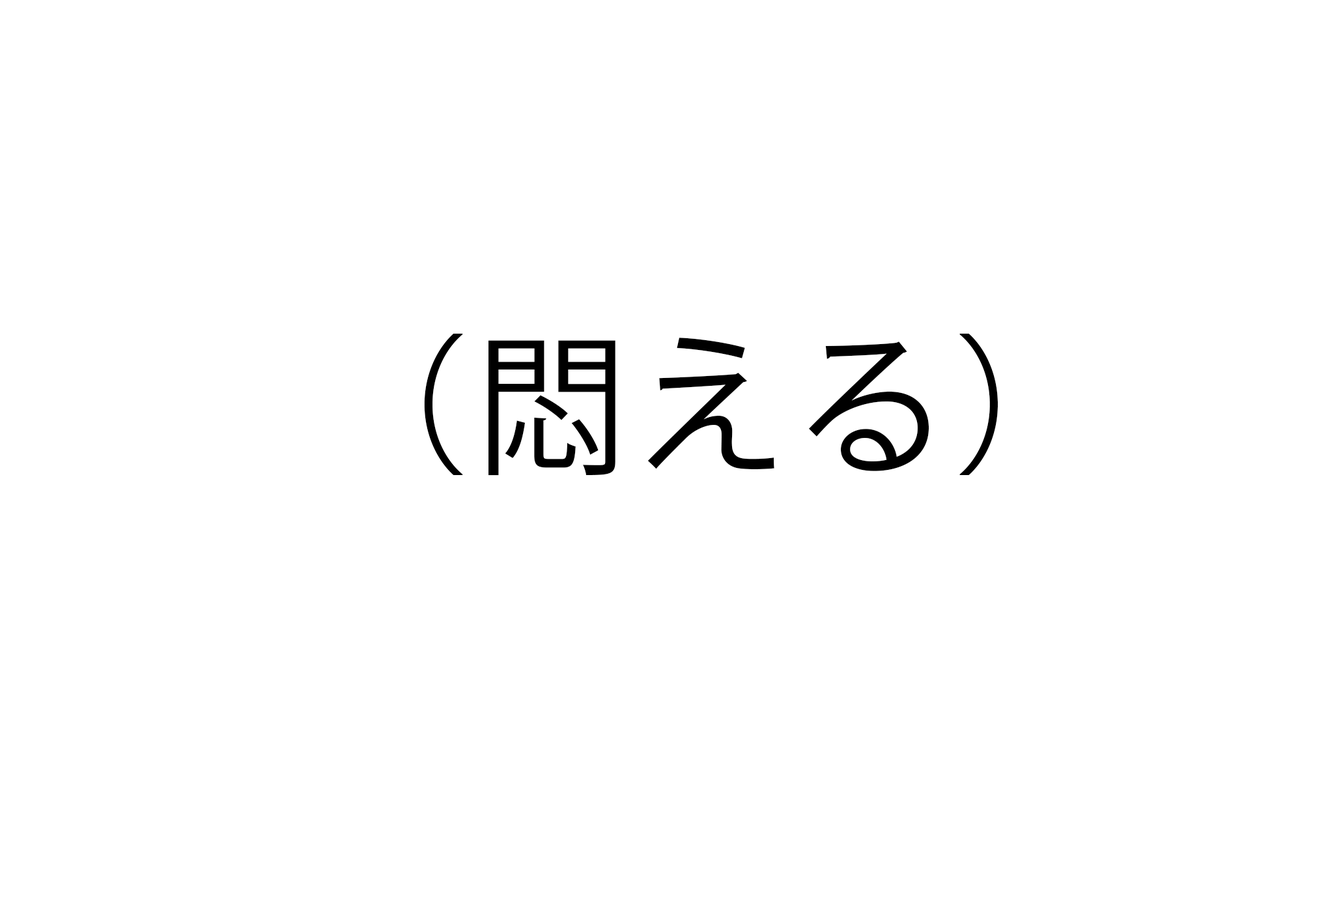
<style>
.page{position:relative;width:1328px;height:898px;background:#ffffff}
.page>*{position:absolute;margin:0}
.t1{font:152px "KozGoPr6N-Regular";letter-spacing:0.05em;color:#000000}
</style>
<div class="page">
<p class="t1" style="left:424px;top:334px;width:574px;height:142px">（悶える）</p>
</div>
